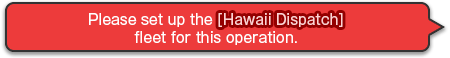
<style>
.page{position:relative;width:450px;height:58px;background:#ed3b3b}
.page>*{position:absolute;margin:0}
.t1{font:14px/18px "GothicMB101Pro-Regular";color:#ffffff}
.t2{font:14px/18px "GothicMB101Pro-Regular";color:#ffd3d3}
</style>
<div class="page">
<p class="t1" style="left:89px;top:13px;width:254px;height:32px;text-align:center">Please set up the <span class="t2">[Hawaii Dispatch]<br></span>fleet for this operation.</p>
<p class="t1" style="left:89px;top:13px;width:254px;height:32px;text-align:center">Please set up the <span class="t2">[Hawaii Dispatch]<br></span>fleet for this operation.</p>
</div>
